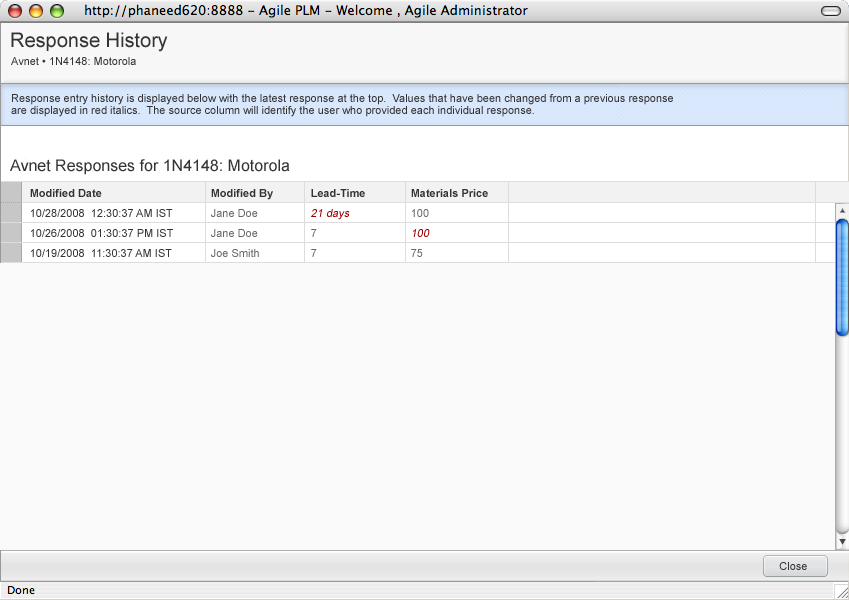
<style>
.page{position:relative;width:849px;height:600px;background:#fafafa}
.page>*{position:absolute;margin:0}
.t1{font:20px "ArialMT";color:#333333}
.t2{font:11px "ArialMT";color:#333333}
.t3{font:11px/12px "ArialMT";color:#333333}
.t4{font:16px "ArialMT";color:#333333}
.t5{font:11px/20px "ArialMT";color:#333333}
.t6{font:11px/16px "Arial-BoldMT";color:#333333}
.t7{font:11px/20px "ArialMT";color:#666666}
.t8{font:11px/20px "ArialMT";color:#990000;font-style:italic}
</style>
<div class="page">
<p class="t1" style="left:11px;top:32px;width:157px;height:20px">Response History</p>
<p class="t2" style="left:11px;top:57px;width:125px;height:8px">Avnet • 1N4148: Motorola</p>
<p class="t3" style="left:11px;top:94px;width:662px;height:23px">Response entry history is displayed below with the latest response at the top.  Values that have been changed from a previous response<br>are displayed in red italics.  The source column will identify the user who provided each individual response.</p>
<p class="t4" style="left:10px;top:159px;width:280px;height:16px">Avnet Responses for 1N4148: Motorola</p>
<p class="t5" style="left:30px;top:189px;width:143px;height:68px"><span class="t6">Modified Date<br></span>10/28/2008  12:30:37 AM IST<br>10/26/2008  01:30:37 PM IST<br>10/19/2008  11:30:37 AM IST</p>
<p class="t7" style="left:211px;top:189px;width:62px;height:68px"><span class="t6">Modified By<br></span>Jane Doe<br>Jane Doe<br>Joe Smith</p>
<p class="t6" style="left:311px;top:189px;width:54px;height:68px">Lead-Time<br><span class="t8">21 days</span><span class="t7"> <br>7<br>7</span></p>
<p class="t6" style="left:411px;top:189px;width:77px;height:68px">Materials Price<br><span class="t7">100<br></span><span class="t8">100 </span><span class="t7"> <br>75</span></p>
<p class="t2" style="left:779px;top:562px;width:28px;height:8px">Close</p>
</div>
